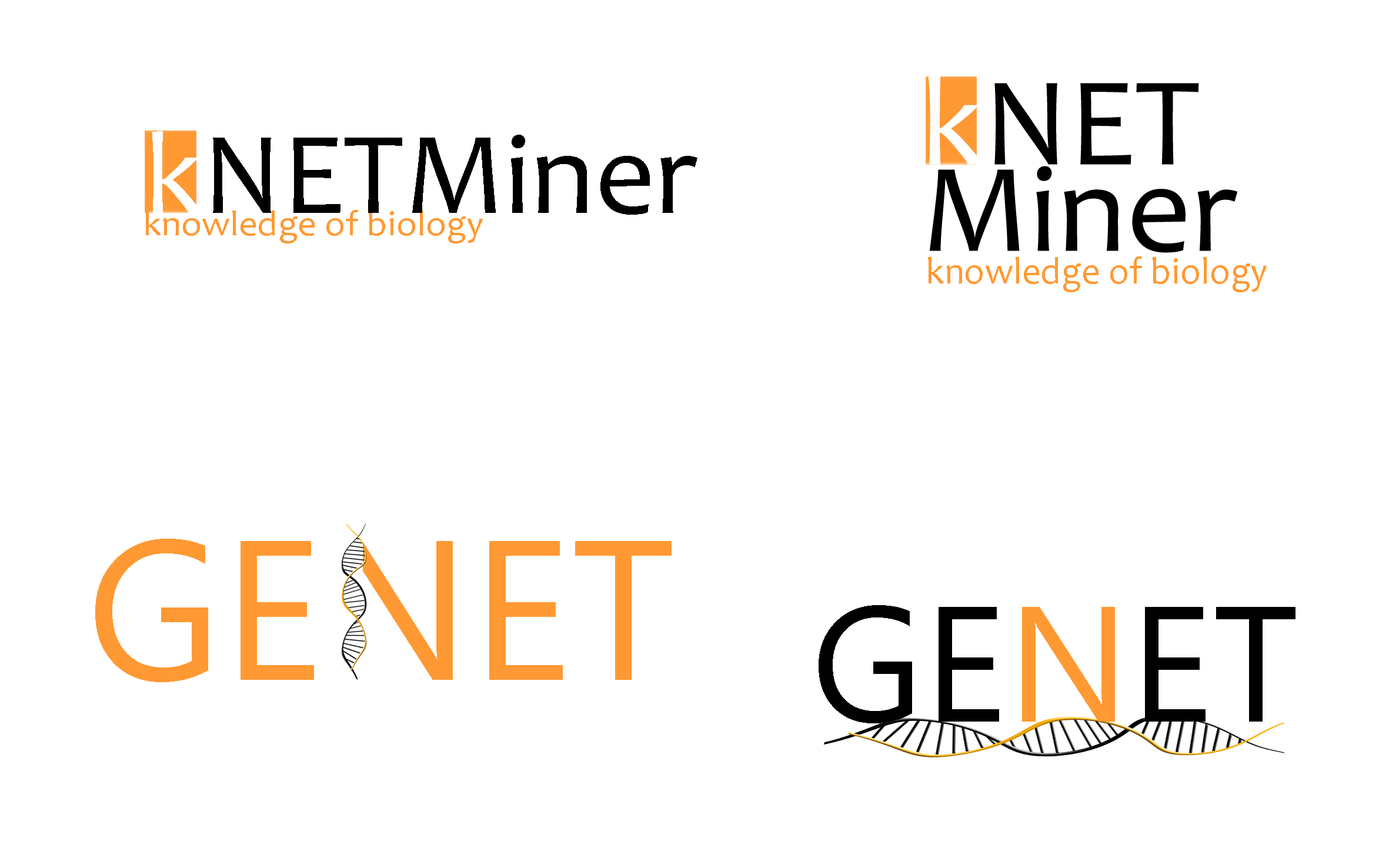
<style>
.page{position:relative;width:1389px;height:858px;background:#ffffff}
.page>*{position:absolute;margin:0}
.t1{font:127.5px/86.6px "Candara";color:#000000}
.t2{font:127.5px/86.6px "Candara";color:#ffffff}
.t3{font:118.3px "Candara";color:#000000}
.t4{font:118.3px "Candara";color:#ffffff}
.t5{font:35.5px "Candara";color:#ff9933;scale:1.04 1}
.t6{font:38.2px "Candara";color:#ff9933;scale:0.97 1}
.t7{font:198.4px "SegoeUI";color:#ff9933}
.t8{font:164.4px "SegoeUI";color:#000000}
.t9{font:164.4px "SegoeUI";color:#ff9933}
</style>
<div class="page">
<p class="t1" style="left:928px;top:76px;width:310px;height:177px"><span class="t2">k</span>NET<br>Miner</p>
<p class="t3" style="left:152px;top:131px;width:546px;height:84px"><span class="t4">k</span>NETMiner</p>
<p class="t5" style="left:145px;top:210px;width:338px;height:34px">knowledge of biology</p>
<p class="t6" style="left:928px;top:256px;width:339px;height:36px">knowledge of biology</p>
<p class="t7" style="left:95px;top:539px;width:577px;height:143px">GENET</p>
<p class="t8" style="left:819px;top:605px;width:477px;height:119px">GE<span class="t9">N</span>ET</p>
</div>
